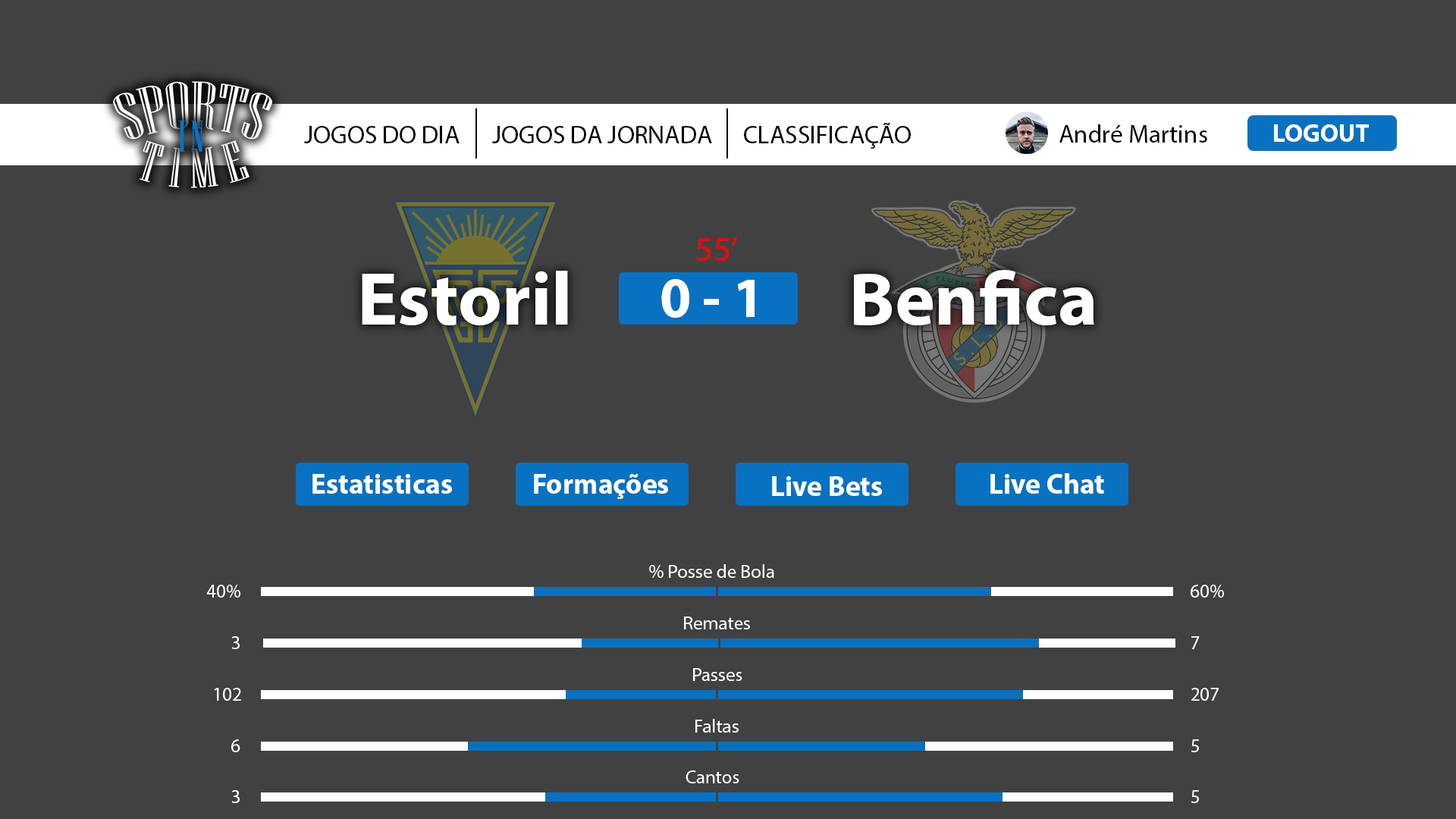
<style>
.page{position:relative;width:1456px;height:819px;background:#424141}
.page>*{position:absolute;margin:0}
.t1{font:25.3px "MyriadPro-Regular";color:#000000}
.t2{font:34.8px "MyriadPro-Regular";color:#ff0000}
.t3{font:75.8px "MyriadPro-Bold";color:#ffffff}
.t4{font:56.9px "MyriadPro-Bold";color:#ffffff}
.t5{font:28.4px "MyriadPro-Bold";color:#ffffff}
.t6{font:19px "MyriadPro-Regular";color:#ffffff}
</style>
<div class="page">
<p class="t1" style="left:304px;top:126px;width:156px;height:17px">JOGOS DO DIA</p>
<p class="t1" style="left:492px;top:126px;width:220px;height:17px">JOGOS DA JORNADA</p>
<p class="t1" style="left:744px;top:122px;width:167px;height:27px">CLASSIFICAÇÃO</p>
<p class="t1" style="left:1059px;top:124px;width:148px;height:19px">André Martins</p>
<p class="t2" style="left:696px;top:237px;width:41px;height:24px">55’</p>
<p class="t3" style="left:854px;top:270px;width:240px;height:55px">Benfica</p>
<p class="t3" style="left:362px;top:271px;width:206px;height:54px">Estoril</p>
<p class="t4" style="left:661px;top:279px;width:94px;height:39px">0 - 1</p>
<p class="t5" style="left:312px;top:474px;width:140px;height:20px">Estatisticas</p>
<p class="t5" style="left:534px;top:474px;width:134px;height:25px">Formações</p>
<p class="t5" style="left:990px;top:473px;width:114px;height:21px">Live Chat</p>
<p class="t5" style="left:772px;top:476px;width:110px;height:20px">Live Bets</p>
<p class="t6" style="left:649px;top:564px;width:125px;height:14px">% Posse de Bola</p>
<p class="t6" style="left:206px;top:585px;width:34px;height:13px">40%</p>
<p class="t6" style="left:1191px;top:585px;width:33px;height:13px">60%</p>
<p class="t6" style="left:684px;top:617px;width:66px;height:12px">Remates</p>
<p class="t6" style="left:232px;top:636px;width:8px;height:13px">3</p>
<p class="t6" style="left:1191px;top:636px;width:9px;height:13px">7</p>
<p class="t6" style="left:693px;top:668px;width:49px;height:13px">Passes</p>
<p class="t6" style="left:214px;top:688px;width:27px;height:13px">102</p>
<p class="t6" style="left:1191px;top:688px;width:28px;height:13px">207</p>
<p class="t6" style="left:695px;top:719px;width:44px;height:14px">Faltas</p>
<p class="t6" style="left:231px;top:739px;width:9px;height:13px">6</p>
<p class="t6" style="left:1191px;top:739px;width:8px;height:13px">5</p>
<p class="t6" style="left:686px;top:770px;width:53px;height:13px">Cantos</p>
<p class="t6" style="left:232px;top:790px;width:8px;height:13px">3</p>
<p class="t6" style="left:1191px;top:790px;width:8px;height:13px">5</p>
</div>
